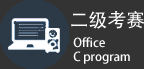
<style>
.page{position:relative;width:144px;height:69px;background:#333333}
.page>*{position:absolute;margin:0}
.t1{font:18.9px "AdobeHeitiStd-Regular";color:#fefefe}
.t2{font:12px/14px "AdobeHeitiStd-Regular";color:#fefefe}
</style>
<div class="page">
<p class="t1" style="left:71px;top:11px;width:74px;height:18px">二级考赛</p>
<p class="t2" style="left:73px;top:37px;width:57px;height:27px">Office<br>C program</p>
</div>
